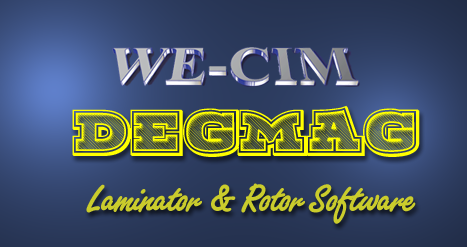
<style>
.page{position:relative;width:471px;height:250px}
.page>*{position:absolute;margin:0}
.t1{font:41.7px "Moogalator";color:#ffff00}
.t2{font:41.7px "FreestyleScriptBoldPlain";color:#cacc2c}
</style>
<div class="page">
<p class="t1" style="left:72px;top:105px;width:348px;height:52px">DEGMAG</p>
<p class="t2" style="left:86px;top:183px;width:330px;height:41px">Laminator &amp; Rotor Software</p>
</div>
